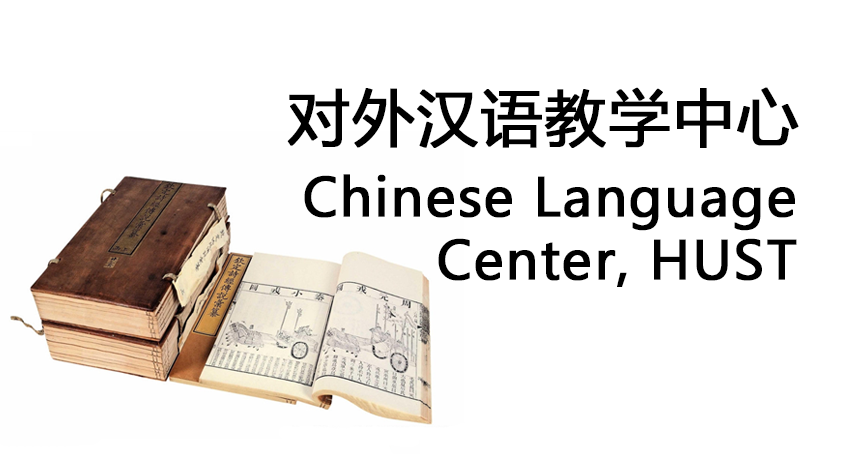
<style>
.page{position:relative;width:850px;height:454px;background:#ffffff}
.page>*{position:absolute;margin:0}
.t1{font:61.2px "MicrosoftYaHei";letter-spacing:0.02em;color:#000000;font-weight:bold}
.t2{font:52.2px/63px "MicrosoftYaHei";letter-spacing:0.02em;color:#000000;font-weight:bold}
</style>
<div class="page">
<p class="t1" style="left:287px;top:87px;width:512px;height:61px">对外汉语教学中心</p>
<p class="t2" style="left:304px;top:174px;width:493px;height:113px;text-align:right">Chinese Language Center, HUST</p>
</div>
